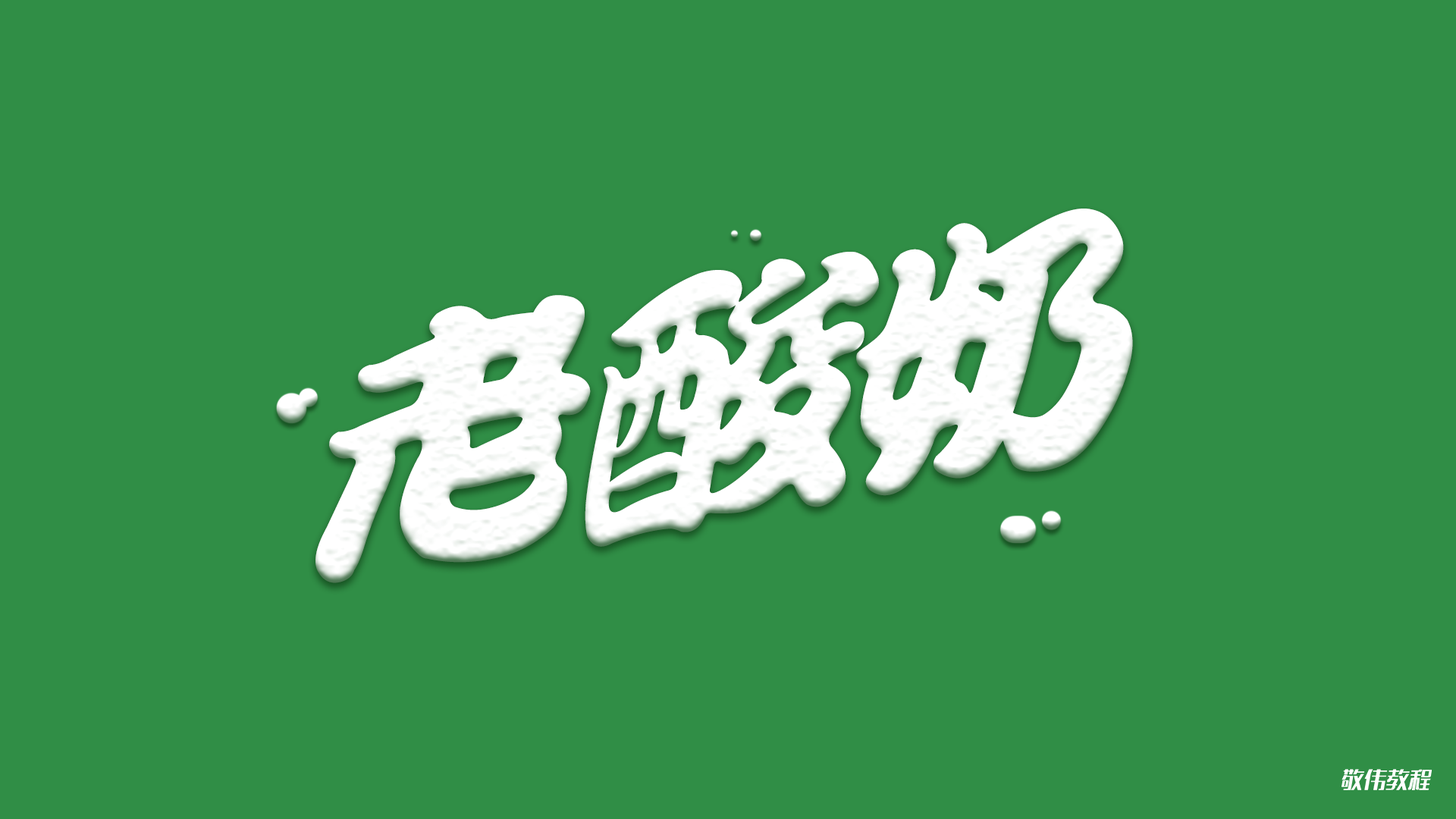
<style>
.page{position:relative;width:1456px;height:819px;background:#308e46}
.page>*{position:absolute;margin:0}
.t1{font:287.5px "HanWangKanTan";letter-spacing:-0.08em;color:#ffffff;font-style:italic;scale:1.04 1}
.t2{font:287.5px "HanWangKanTan";letter-spacing:-0.06em;color:#ffffff;font-style:italic;scale:1.04 1}
</style>
<div class="page">
<p class="t1" style="left:315px;top:209px;width:818px;height:374px;rotate:-9deg">老酸<span class="t2">奶</span></p>
</div>
